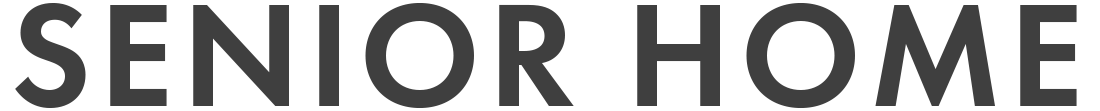
<style>
.page{position:relative;width:1100px;height:111px;background:#ffffff}
.page>*{position:absolute;margin:0}
.t1{font:152.1px "FuturaPT-Demi";letter-spacing:0.05em;color:#3f3f3f}
</style>
<div class="page">
<p class="t1" style="left:15px;top:3px;width:1062px;height:106px">SENIOR HOME</p>
</div>
